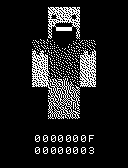
<style>
.page{position:relative;width:128px;height:168px;background:#000000}
.page>*{position:absolute;margin:0}
.t1{font:8px/12px "Terminal";letter-spacing:0.2em;color:#ffffff}
</style>
<div class="page">
<p class="t1" style="left:35px;top:135px;width:59px;height:19px;text-align:center">0000000F<br>00000003</p>
</div>
